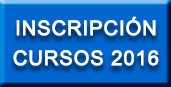
<style>
.page{position:relative;width:171px;height:87px;background:#0166d0}
.page>*{position:absolute;margin:0}
.t1{font:20px/30px "ArialMT";letter-spacing:0.025em;color:#ffffff;font-weight:bold}
</style>
<div class="page">
<p class="t1" style="left:13px;top:16px;width:146px;height:50px;text-align:center">INSCRIPCIÓN<br>CURSOS 2016</p>
</div>
